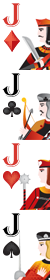
<style>
.page{position:relative;width:50px;height:280px;background:#ffffff}
.page>*{position:absolute;margin:0}
.t1{font:35px "Algerian";letter-spacing:0.04em;color:#d6362e;text-transform:uppercase}
.t2{font:35px "Algerian";letter-spacing:0.04em;color:#000000;text-transform:uppercase}
</style>
<div class="page">
<p class="t1" style="left:2px;top:3px;width:19px;height:24px">J</p>
<p class="t2" style="left:2px;top:73px;width:19px;height:24px">J</p>
<p class="t1" style="left:2px;top:143px;width:19px;height:24px">J</p>
<p class="t2" style="left:2px;top:213px;width:19px;height:24px">J</p>
</div>
